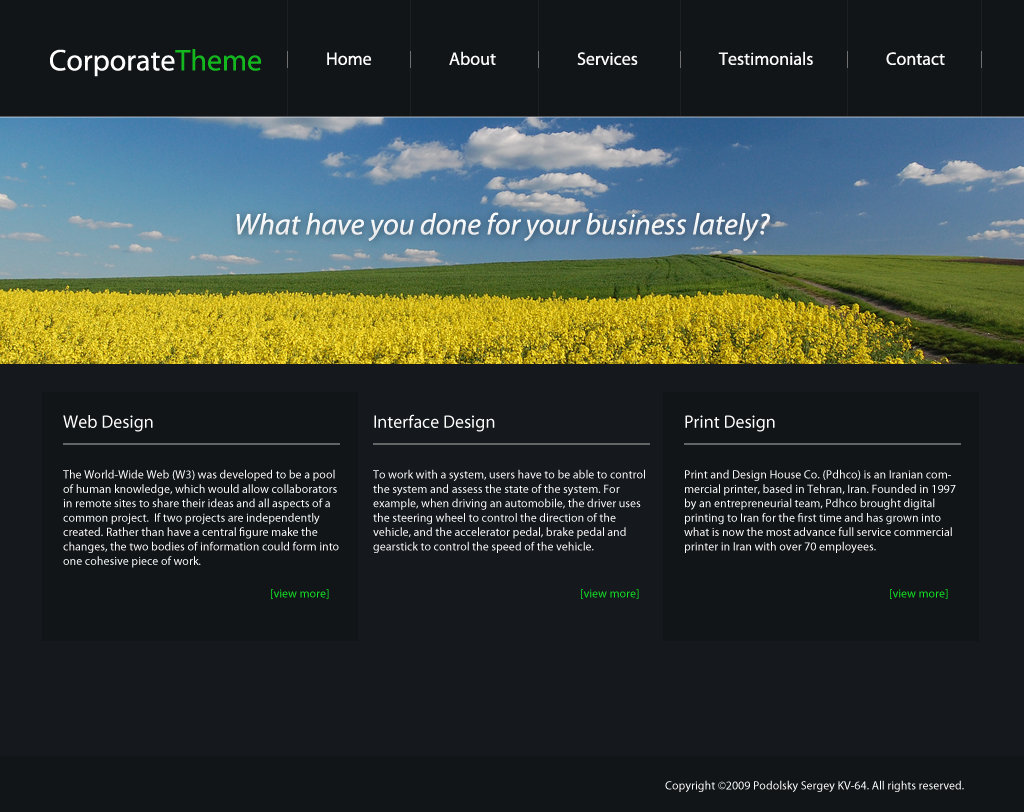
<style>
.page{position:relative;width:1024px;height:812px;background:#121518}
.page>*{position:absolute;margin:0}
.t1{font:30px "MyriadPro-Regular";color:#ffffff}
.t2{font:30px "MyriadPro-Regular";color:#13b71e}
.t3{font:18px "MyriadPro-Regular";color:#ffffff}
.t4{font:18px "MyriadPro-Regular";color:#fafafa}
.t5{font:30px "MyriadPro-It";color:#ffffff}
.t6{font:12px "MyriadPro-Regular";color:#ffffff}
.t7{font:12px "MyriadPro-Regular";color:#13e624}
</style>
<div class="page">
<p class="t1" style="left:50px;top:49px;width:212px;height:28px">Corporate<span class="t2">Theme</span></p>
<p class="t3" style="left:327px;top:52px;width:45px;height:13px">Home</p>
<p class="t4" style="left:449px;top:51px;width:47px;height:14px">About</p>
<p class="t4" style="left:577px;top:52px;width:61px;height:13px">Services</p>
<p class="t4" style="left:718px;top:51px;width:95px;height:14px">Testimonials</p>
<p class="t4" style="left:886px;top:52px;width:59px;height:13px">Contact</p>
<p class="t5" style="left:236px;top:212px;width:534px;height:29px">What have you done for your business lately?</p>
<p class="t3" style="left:374px;top:414px;width:121px;height:18px">Interface Design</p>
<p class="t3" style="left:63px;top:415px;width:90px;height:17px">Web Design</p>
<p class="t3" style="left:685px;top:415px;width:90px;height:17px">Print Design</p>
<p class="t6" style="left:63px;top:469px;width:276px;height:99px">The World-Wide Web (W3) was developed to be a pool of human knowledge, which would allow collaborators in remote sites to share their ideas and all aspects of a common project.  If two projects are independently created. Rather than have a central figure make the changes, the two bodies of information could form into one cohesive piece of work.</p>
<p class="t6" style="left:373px;top:469px;width:272px;height:84px">To work with a system, users have to be able to control the system and assess the state of the system. For example, when driving an automobile, the driver uses the steering wheel to control the direction of the vehicle, and the accelerator pedal, brake pedal and gearstick to control the speed of the vehicle.</p>
<p class="t6" style="left:684px;top:469px;width:272px;height:84px">Print and Design House Co. (Pdhco) is an Iranian commercial printer, based in Tehran, Iran. Founded in 1997 by an entrepreneurial team, Pdhco brought digital printing to Iran for the first time and has grown into what is now the most advance full service commercial printer in Iran with over 70 employees.</p>
<p class="t7" style="left:271px;top:589px;width:58px;height:10px">[view more]</p>
<p class="t7" style="left:581px;top:589px;width:58px;height:10px">[view more]</p>
<p class="t7" style="left:890px;top:589px;width:58px;height:10px">[view more]</p>
<p class="t6" style="left:665px;top:780px;width:299px;height:12px">Copyright ©2009 Podolsky Sergey KV-64. All rights reserved.</p>
</div>
